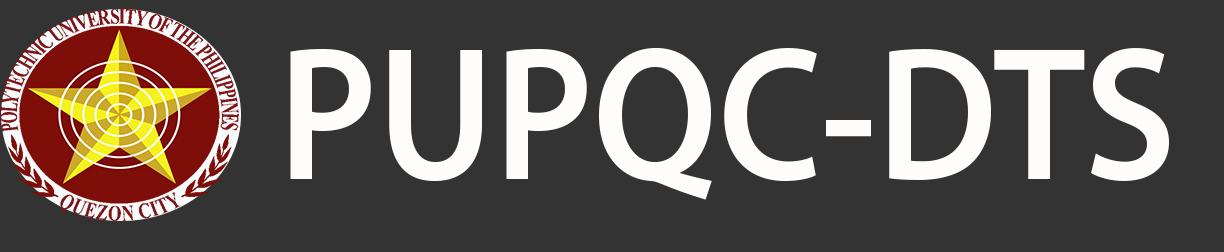
<style>
.page{position:relative;width:1224px;height:252px;background:#333333}
.page>*{position:absolute;margin:0}
.t1{font:191.4px "MyriadPro-Semibold";color:#fbfbfb;scale:0.92 1}
</style>
<div class="page">
<p class="t1" style="left:290px;top:47px;width:879px;height:153px">PUPQC-DTS</p>
</div>
